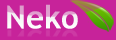
<style>
.page{position:relative;width:116px;height:40px;background:#c7239a}
.page>*{position:absolute;margin:0}
.t1{font:31.5px "TrebuchetMS";font-weight:bold}
</style>
<div class="page">
<p class="t1" style="left:7px;top:4px;width:71px;height:25px">Neko</p>
</div>
